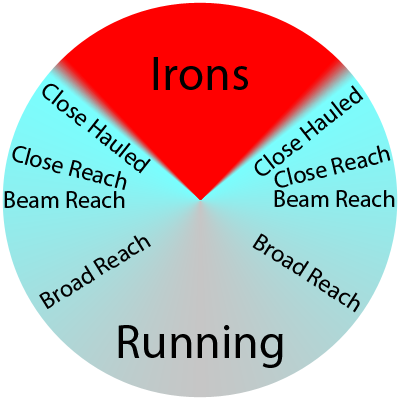
<style>
.page{position:relative;width:400px;height:400px;background:#ffffff}
.page>*{position:absolute;margin:0}
.t1{font:48px "MyriadPro-Regular";color:#000000}
.t2{font:24px "MyriadPro-Regular";color:#000000}
</style>
<div class="page">
<p class="t1" style="left:153px;top:57px;width:95px;height:33px">Irons</p>
<p class="t2" style="left:42px;top:83px;width:109px;height:91px;rotate:38deg">Close Hauled</p>
<p class="t2" style="left:254px;top:85px;width:110px;height:91px;rotate:-38deg">Close Hauled</p>
<p class="t2" style="left:12px;top:146px;width:115px;height:44px;rotate:15deg">Close Reach</p>
<p class="t2" style="left:274px;top:145px;width:117px;height:43px;rotate:-14deg">Close Reach</p>
<p class="t2" style="left:4px;top:191px;width:121px;height:17px">Beam Reach</p>
<p class="t2" style="left:274px;top:190px;width:121px;height:17px">Beam Reach</p>
<p class="t2" style="left:252px;top:233px;width:108px;height:80px;rotate:32deg">Broad Reach</p>
<p class="t2" style="left:39px;top:235px;width:112px;height:74px;rotate:-32deg">Broad Reach</p>
<p class="t1" style="left:118px;top:325px;width:165px;height:43px">Running</p>
</div>
